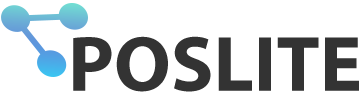
<style>
.page{position:relative;width:360px;height:98px;background:#ffffff}
.page>*{position:absolute;margin:0}
.t1{font:79.2px "MyriadPro-Bold";color:#333333}
</style>
<div class="page">
<p class="t1" style="left:73px;top:36px;width:286px;height:56px">POSLITE</p>
</div>
